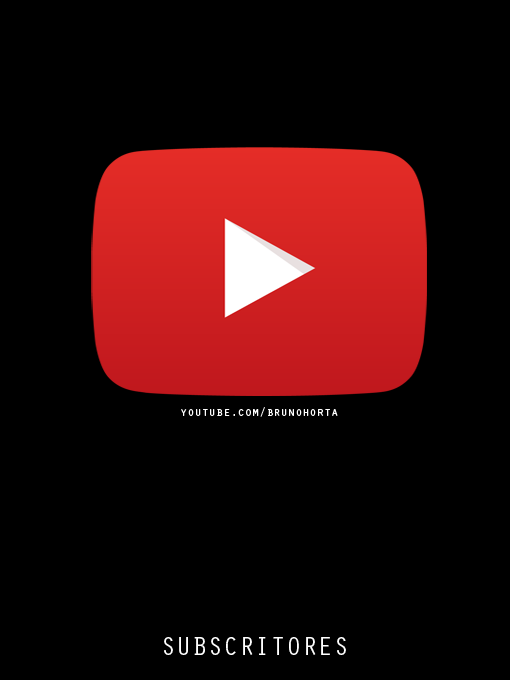
<style>
.page{position:relative;width:510px;height:680px;background:#000000}
.page>*{position:absolute;margin:0}
.t1{font:12px "OratorStd";color:#ffffff}
.t2{font:26.2px "OratorStd";color:#ffffff}
</style>
<div class="page">
<p class="t1" style="left:181px;top:407px;width:157px;height:10px">youtube.com/brunohorta</p>
<p class="t2" style="left:164px;top:637px;width:182px;height:18px">SUBSCRITORES</p>
</div>
